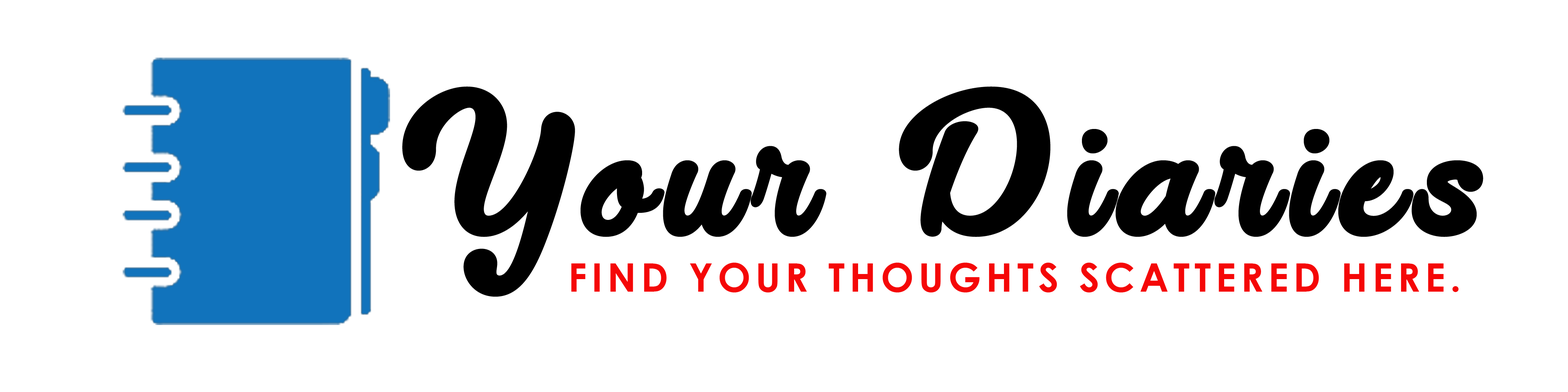
<style>
.page{position:relative;width:1568px;height:392px;background:#ffffff}
.page>*{position:absolute;margin:0}
.t1{font:168.2px "LucytheCat-Regular";letter-spacing:0.08em;color:#000000}
.t2{font:39.2px "CenturyGothic-Bold";letter-spacing:0.12em;color:#f50707}
</style>
<div class="page">
<p class="t1" style="left:402px;top:86px;width:1081px;height:211px">Your Diaries</p>
<p class="t2" style="left:571px;top:263px;width:888px;height:29px">FIND YOUR THOUGHTS SCATTERED HERE.</p>
</div>
